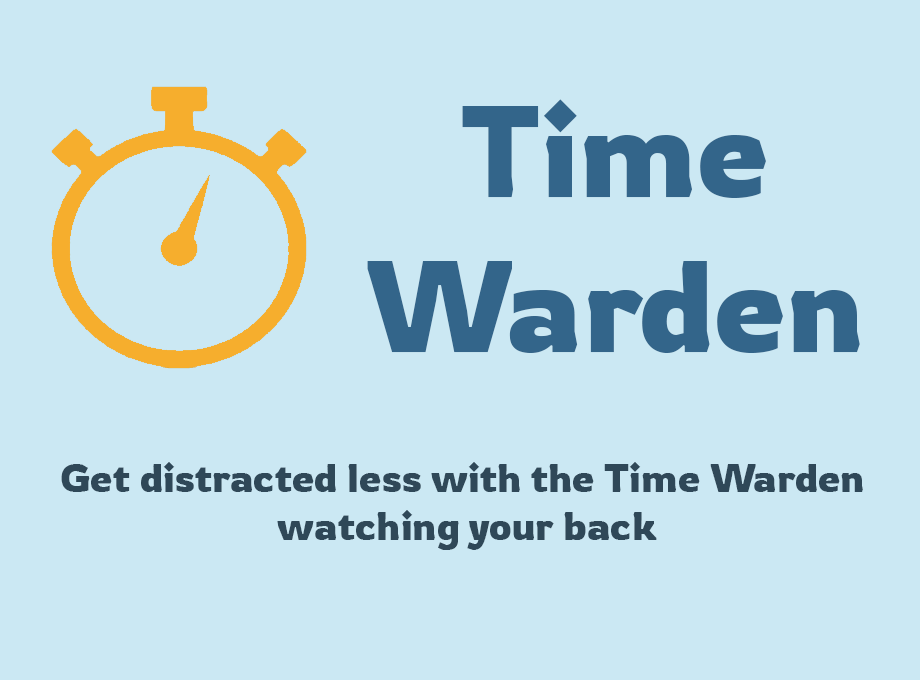
<style>
.page{position:relative;width:920px;height:680px;background:#cbe8f3}
.page>*{position:absolute;margin:0}
.t1{font:129px "Rowdies-Regular";color:#33658a}
.t2{font:40px "Rowdies-Regular";color:#2f4858}
</style>
<div class="page">
<p class="t1" style="left:367px;top:99px;width:493px;height:254px;text-align:center">Time<br>Warden</p>
<p class="t2" style="left:61px;top:462px;width:802px;height:88px;text-align:center">Get distracted less with the Time Warden<br> watching your back</p>
</div>
